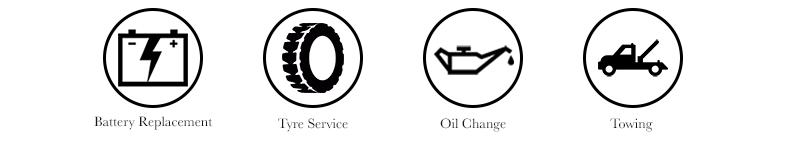
<style>
.page{position:relative;width:786px;height:160px;background:#ffffff}
.page>*{position:absolute;margin:0}
.t1{font:14px "Baskerville";color:#171616}
</style>
<div class="page">
<p class="t1" style="left:94px;top:116px;width:119px;height:14px">Battery Replacement</p>
<p class="t1" style="left:278px;top:118px;width:70px;height:14px">Tyre Service</p>
<p class="t1" style="left:440px;top:118px;width:66px;height:14px">Oil Change</p>
<p class="t1" style="left:610px;top:118px;width:43px;height:14px">Towing</p>
</div>
